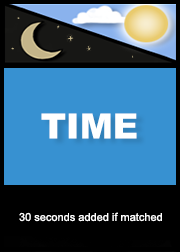
<style>
.page{position:relative;width:180px;height:252px;background:#3791d1}
.page>*{position:absolute;margin:0}
.t1{font:35px "Arial-Black";color:#ffffff}
.t2{font:11px "ArialMT";color:#ffffff}
</style>
<div class="page">
<p class="t1" style="left:41px;top:113px;width:96px;height:26px">TIME</p>
<p class="t2" style="left:19px;top:212px;width:143px;height:10px">30 seconds added if matched</p>
</div>
